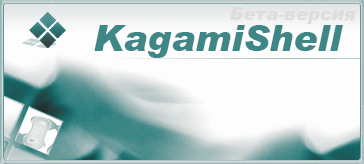
<style>
.page{position:relative;width:364px;height:164px;background:#fdfdfd}
.page>*{position:absolute;margin:0}
.t1{font:18px "ArialBlackCyrIt-Italic";color:#dedcdc}
.t2{font:36px "ArialBlackCyrIt-Italic";color:#3f8787}
</style>
<div class="page">
<p class="t1" style="left:230px;top:7px;width:126px;height:17px">Бета-версия</p>
<p class="t2" style="left:94px;top:25px;width:249px;height:33px">KagamiShell</p>
</div>
